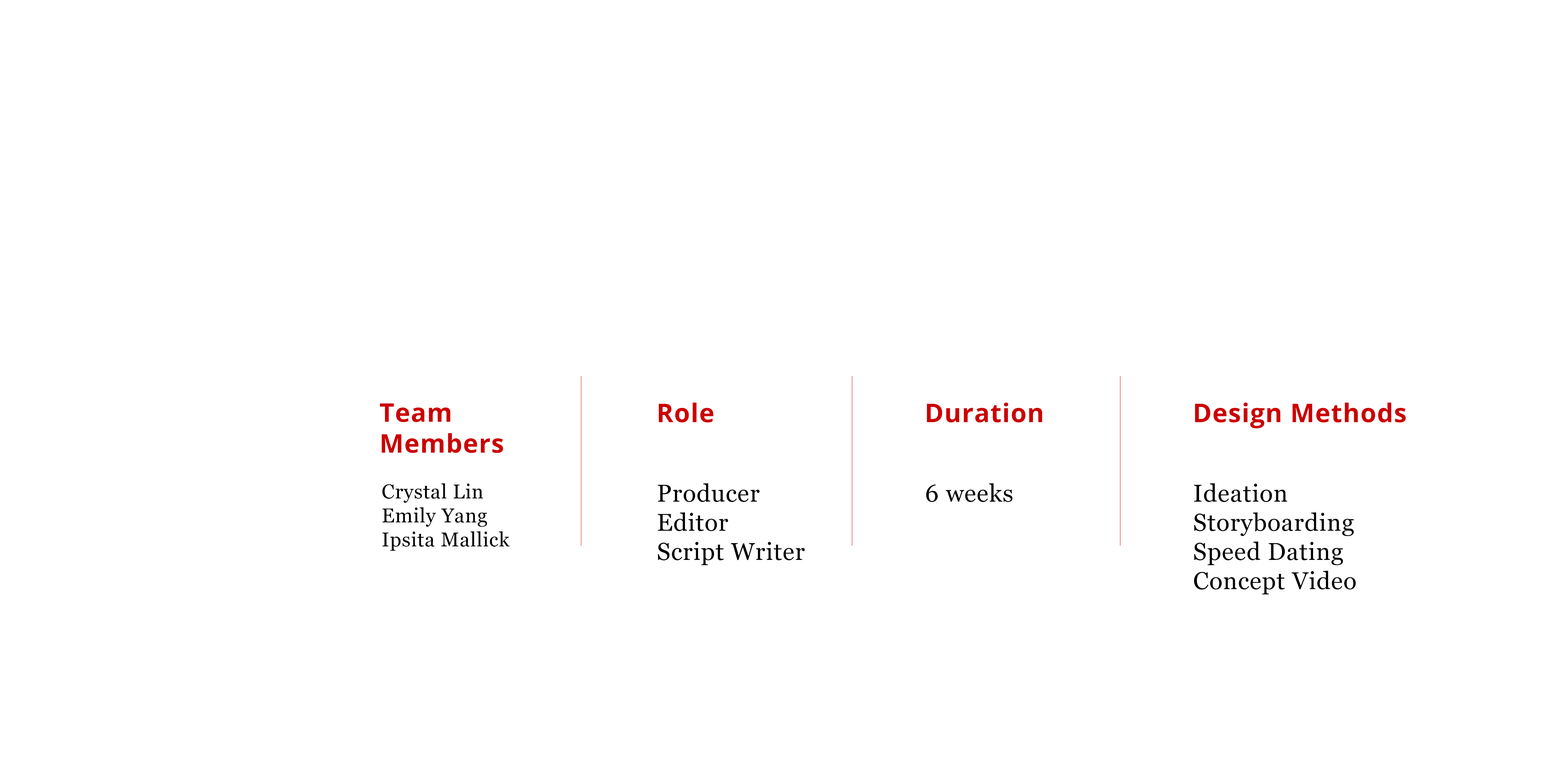
<style>
.page{position:relative;width:1563px;height:763px;background:#ffffff}
.page>*{position:absolute;margin:0}
.t1{font:25.7px "OpenSans-Bold";letter-spacing:0.025em;color:#cc0000}
.t2{font:20px "Georgia";letter-spacing:0.025em;color:#000000}
.t3{font:24.3px "Georgia";letter-spacing:0.025em;color:#000000}
</style>
<div class="page">
<p class="t1" style="left:380px;top:403px;width:123px;height:50px">Team <br>Members</p>
<p class="t1" style="left:659px;top:403px;width:55px;height:20px">Role</p>
<p class="t1" style="left:927px;top:403px;width:115px;height:20px">Duration</p>
<p class="t1" style="left:1195px;top:403px;width:211px;height:25px">Design Methods</p>
<p class="t2" style="left:382px;top:483px;width:128px;height:68px">Crystal Lin<br>Emily Yang<br>Ipsita Mallick</p>
<p class="t3" style="left:658px;top:483px;width:147px;height:82px">Producer<br>Editor <br>Script Writer</p>
<p class="t3" style="left:926px;top:483px;width:86px;height:19px">6 weeks</p>
<p class="t3" style="left:1194px;top:483px;width:162px;height:112px">Ideation<br>Storyboarding<br>Speed Dating<br>Concept Video</p>
</div>
